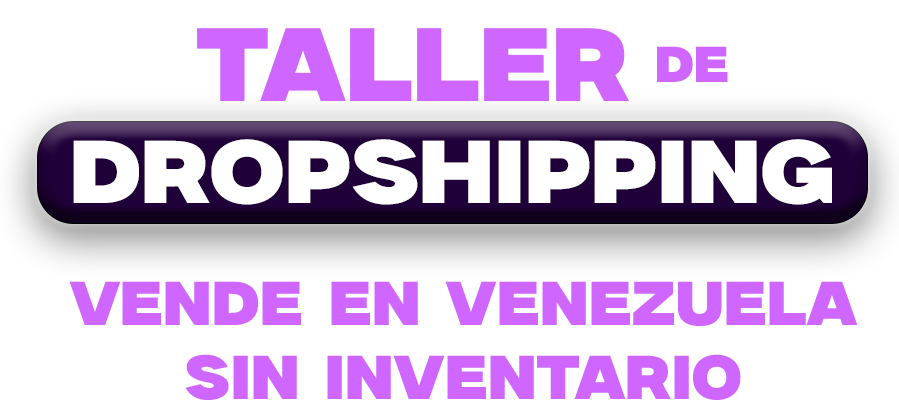
<style>
.page{position:relative;width:899px;height:420px;background:#ffffff}
.page>*{position:absolute;margin:0}
.t1{font:104px "MilkerRegular";letter-spacing:0.011em;color:#ce66ff}
.t2{font:50.5px "MilkerRegular";letter-spacing:0.011em;color:#ce66ff}
.t3{font:88.8px "MilkerRegular";letter-spacing:0.011em;color:#ffffff;scale:1.04 1}
.t4{font:61.8px "MilkerRegular";letter-spacing:0.011em;color:#ce66ff}
</style>
<div class="page">
<p class="t1" style="left:197px;top:28px;width:432px;height:74px">TALLER</p>
<p class="t2" style="left:657px;top:46px;width:71px;height:36px">DE</p>
<p class="t3" style="left:73px;top:139px;width:759px;height:66px">DROPSHIPPING</p>
<p class="t4" style="left:69px;top:281px;width:789px;height:119px;text-align:center">Vende en VENEZUELA<br>sin INVENTARIO</p>
</div>
